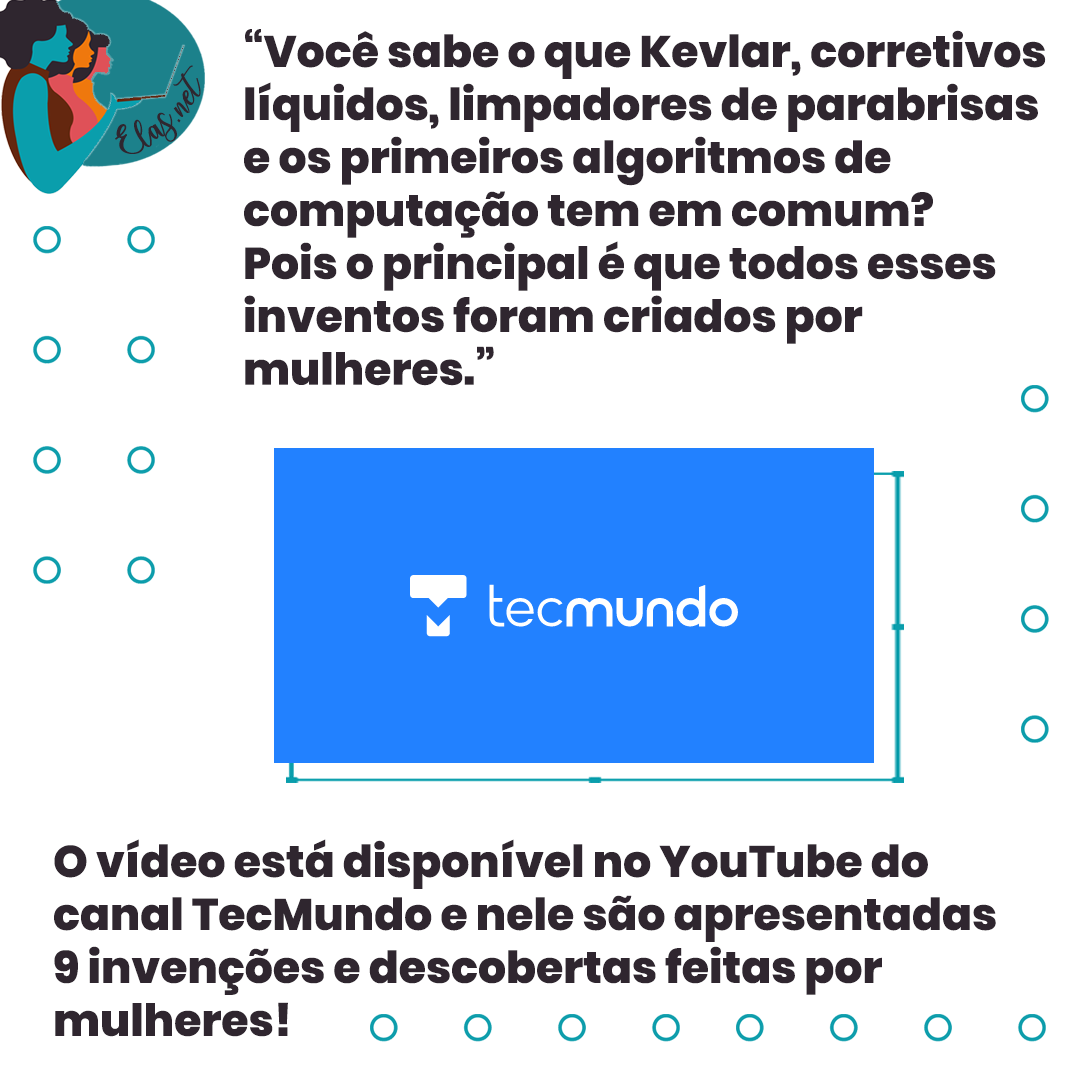
<style>
.page{position:relative;width:1080px;height:1080px;background:#ffffff}
.page>*{position:absolute;margin:0}
.t1{font:44.1px "Poppins-ExtraBold";color:#2f262f}
.t2{font:25px "charlinda-Regular";color:#2f262f;scale:1.18 1}
</style>
<div class="page">
<p class="t1" style="left:244px;top:29px;width:802px;height:357px">“Você sabe o que Kevlar, corretivos <br>líquidos, limpadores de parabrisas <br>e os primeiros algoritmos de <br>computação tem em comum? <br>Pois o principal é que todos esses <br>inventos foram criados por <br>mulheres.”</p>
<p class="t2" style="left:115px;top:65px;width:86px;height:89px;rotate:-43deg">Elas.net</p>
<p class="t1" style="left:54px;top:839px;width:942px;height:198px">O vídeo está disponível no YouTube do <br>canal TecMundo e nele são apresentadas <br>9 invenções e descobertas feitas por <br>mulheres!</p>
</div>
